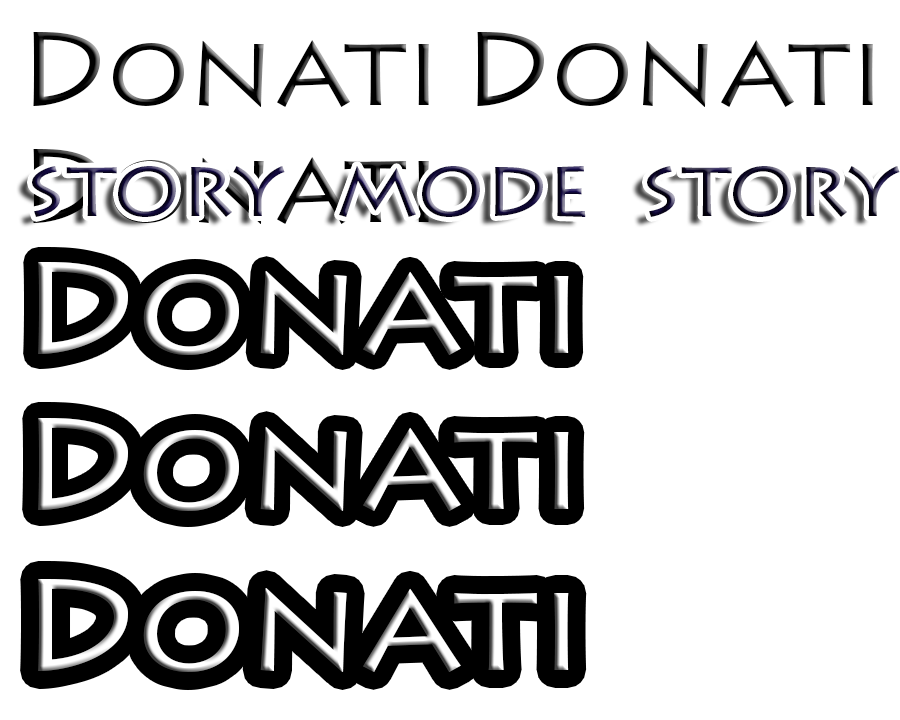
<style>
.page{position:relative;width:900px;height:720px;background:#ffffff}
.page>*{position:absolute;margin:0}
.t1{font:103.3px "LithosPro-Regular";scale:1.04 1}
.t2{font:82.4px "LithosPro-Regular";scale:1.06 1}
.t3{font:129.5px "LithosPro-Regular";scale:1.11 1}
</style>
<div class="page">
<p class="t1" style="left:33px;top:32px;width:396px;height:75px">Donati</p>
<p class="t1" style="left:477px;top:32px;width:396px;height:75px">Donati</p>
<p class="t1" style="left:33px;top:149px;width:396px;height:75px">Donati</p>
<p class="t2" style="left:32px;top:166px;width:554px;height:51px">story  mode</p>
<p class="t3" style="left:38px;top:261px;width:531px;height:94px">Donati</p>
<p class="t3" style="left:38px;top:417px;width:531px;height:94px">Donati</p>
<p class="t3" style="left:38px;top:578px;width:531px;height:94px">Donati</p>
</div>
